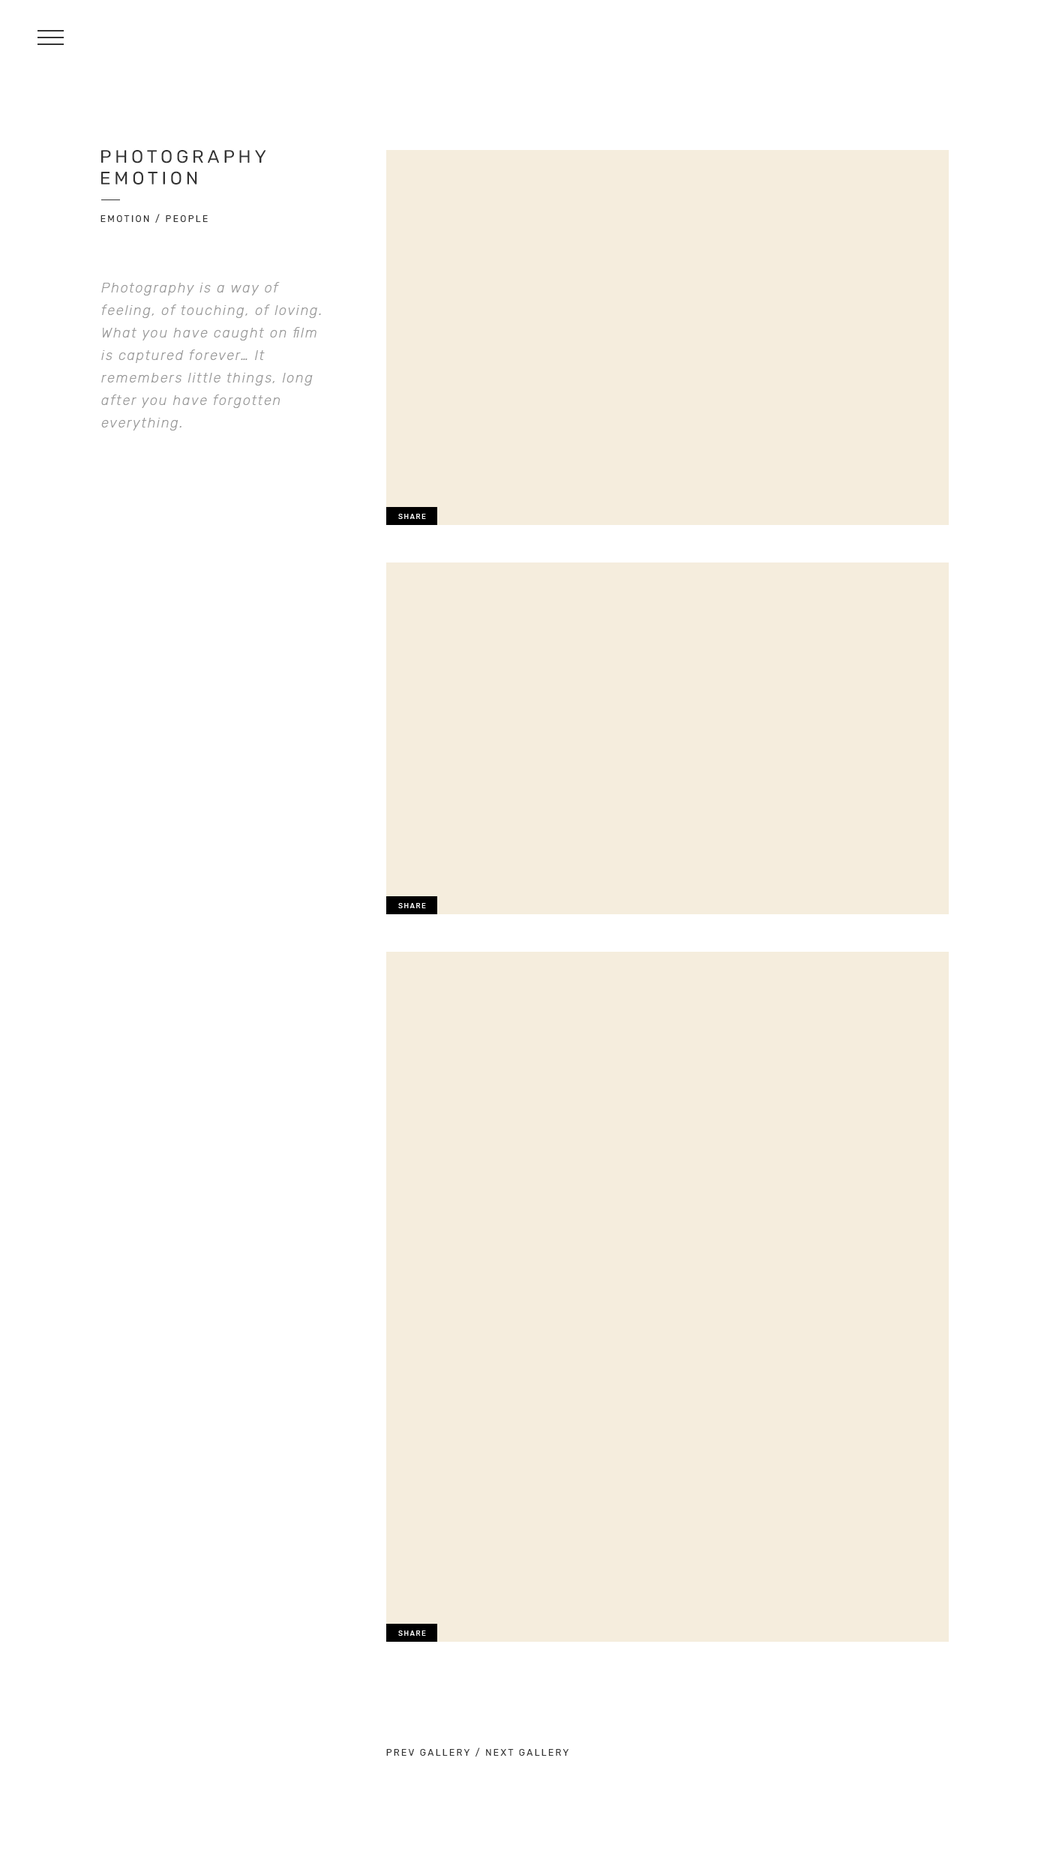
<style>
.page{position:relative;width:1050px;height:1875px;background:#ffffff}
.page>*{position:absolute;margin:0}
.t1{font:18px "Rubik-Regular";letter-spacing:0.2em;color:#333333;text-transform:uppercase}
.t2{font:9px "Rubik-Regular";letter-spacing:0.2em;color:#333333;text-transform:uppercase}
.t3{font:13.5px/22.5px "Rubik-LightItalic";letter-spacing:0.1em;color:#999999}
.t4{font:6.8px "Rubik-Regular";letter-spacing:0.2em;color:#ffffff;text-transform:uppercase}
</style>
<div class="page">
<p class="t1" style="left:101px;top:150px;width:165px;height:34px">Photography <br>Emotion</p>
<p class="t2" style="left:100px;top:214px;width:108px;height:9px">Emotion / People</p>
<p class="t3" style="left:101px;top:282px;width:220px;height:148px">Photography is a way of feeling, of touching, of loving. What you have caught on film is captured forever… It remembers little things, long after you have forgotten everything.</p>
<p class="t4" style="left:398px;top:514px;width:28px;height:5px">SHARE</p>
<p class="t4" style="left:398px;top:903px;width:28px;height:5px">SHARE</p>
<p class="t4" style="left:398px;top:1630px;width:28px;height:6px">SHARE</p>
<p class="t2" style="left:386px;top:1748px;width:182px;height:8px">PRev Gallery / Next Gallery</p>
</div>
